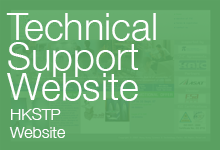
<style>
.page{position:relative;width:220px;height:150px}
.page>*{position:absolute;margin:0}
.t1{font:38px/30px "HelveticaNeue-Light";color:#ffffff}
.t2{font:16px/18px "HelveticaNeue-Light";color:#ffffff}
</style>
<div class="page">
<p class="t1" style="left:6px;top:13px;width:150px;height:88px">Technical<br>Support <br>Website</p>
<p class="t2" style="left:9px;top:108px;width:56px;height:30px">HKSTP<br>Website</p>
</div>
